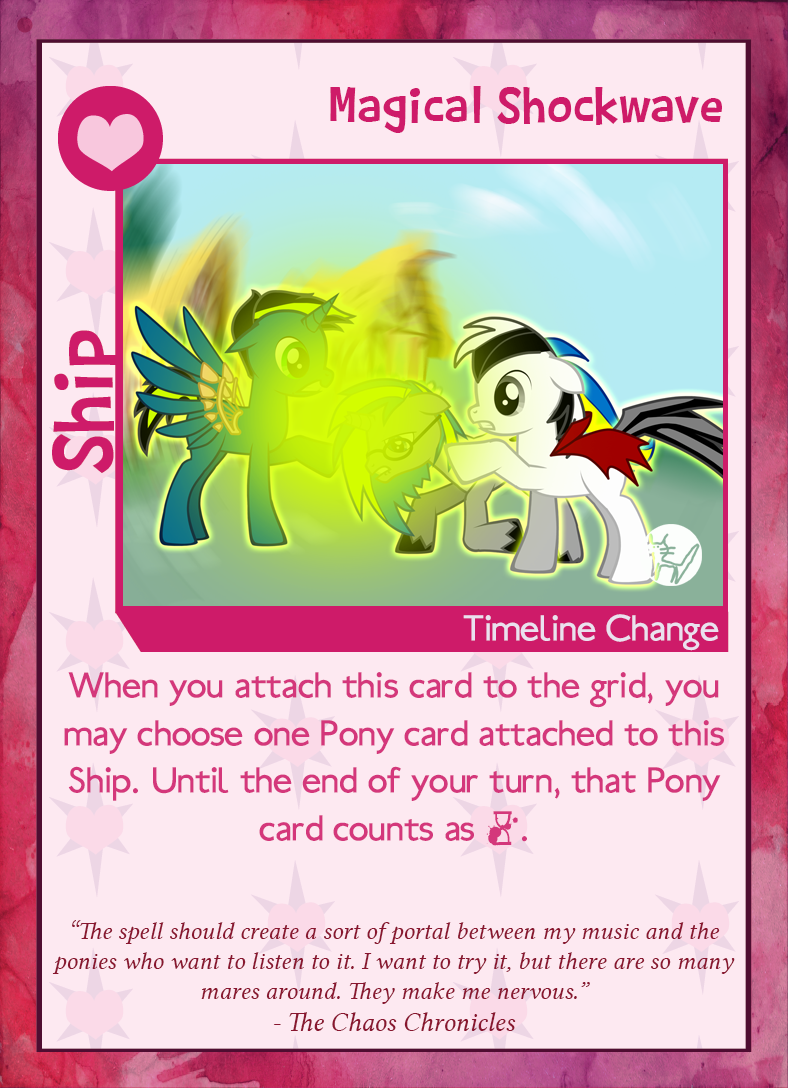
<style>
.page{position:relative;width:788px;height:1088px;background:#fde9f1}
.page>*{position:absolute;margin:0}
.t1{font:56.2px "BarthowheelRegular";color:#ce1b69}
.t2{font:39.8px "Ubahn";color:#eae1ef}
.t3{font:39.8px "Ubahn";color:#d4377b}
.t4{font:25px "LinLibertineI";color:#89162f}
.t5{font:27.1px "LinLibertineI";color:#89162f}
</style>
<div class="page">
<p class="t1" style="left:330px;top:86px;width:392px;height:47px">Magical Shockwave</p>
<p class="t2" style="left:463px;top:614px;width:256px;height:37px">Timeline Change</p>
<p class="t3" style="left:64px;top:672px;width:660px;height:174px;text-align:center">When you attach this card to the grid, you<br>may choose one Pony card attached to this<br>Ship. Until the end of your turn, that Pony<br>card counts as $.</p>
<p class="t4" style="left:52px;top:920px;width:683px;height:111px;text-align:center">“The spell should create a sort of portal between my music and the<br>ponies who want to listen to it. I want to try it, but there are so many<br>mares around. They make me nervous.”<br>- <span class="t5">The Chaos Chronicles</span></p>
</div>
